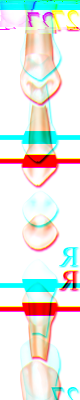
<style>
.page{position:relative;width:80px;height:400px;background:#ffffff}
.page>*{position:absolute;margin:0}
.t1{font:28.4px "TimesNewRomanPSMT";letter-spacing:0.005em}
</style>
<div class="page">
<p class="t1" style="left:59px;top:237px;width:20px;height:19px;rotate:180deg">R</p>
</div>
